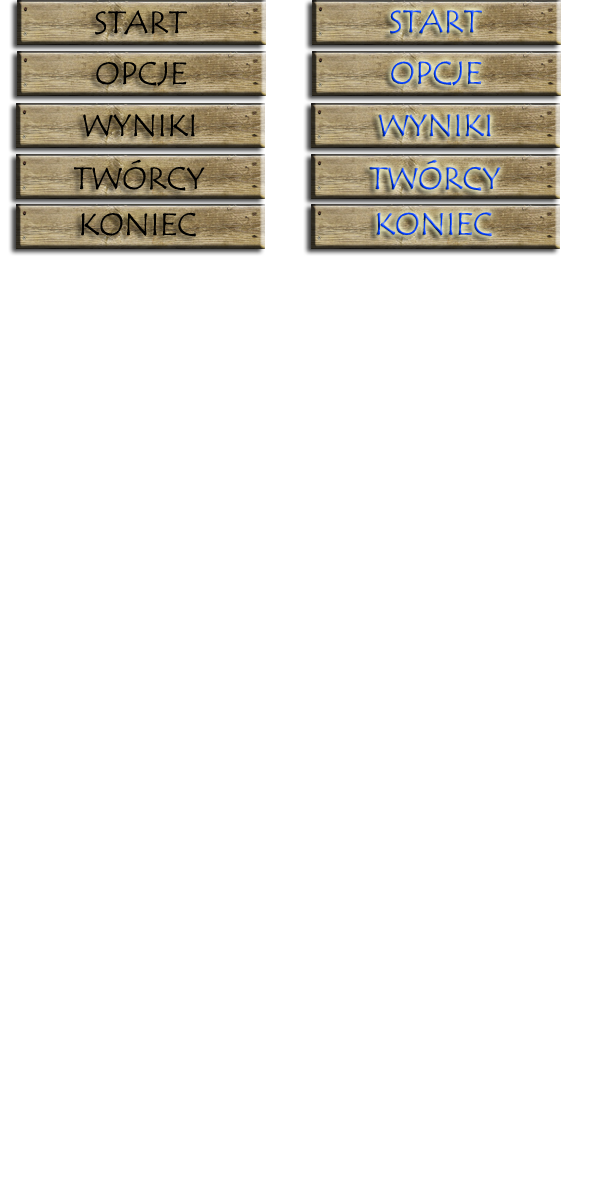
<style>
.page{position:relative;width:592px;height:1198px;background:#ffffff}
.page>*{position:absolute;margin:0}
.t1{font:32px "TempusSansITC"}
</style>
<div class="page">
<p class="t1" style="left:390px;top:9px;width:92px;height:25px">START</p>
<p class="t1" style="left:391px;top:61px;width:91px;height:25px">OPCJE</p>
<p class="t1" style="left:379px;top:114px;width:112px;height:23px">WYNIKI</p>
<p class="t1" style="left:370px;top:159px;width:131px;height:32px">TWÓRCY</p>
<p class="t1" style="left:377px;top:212px;width:115px;height:24px">KONIEC</p>
</div>
